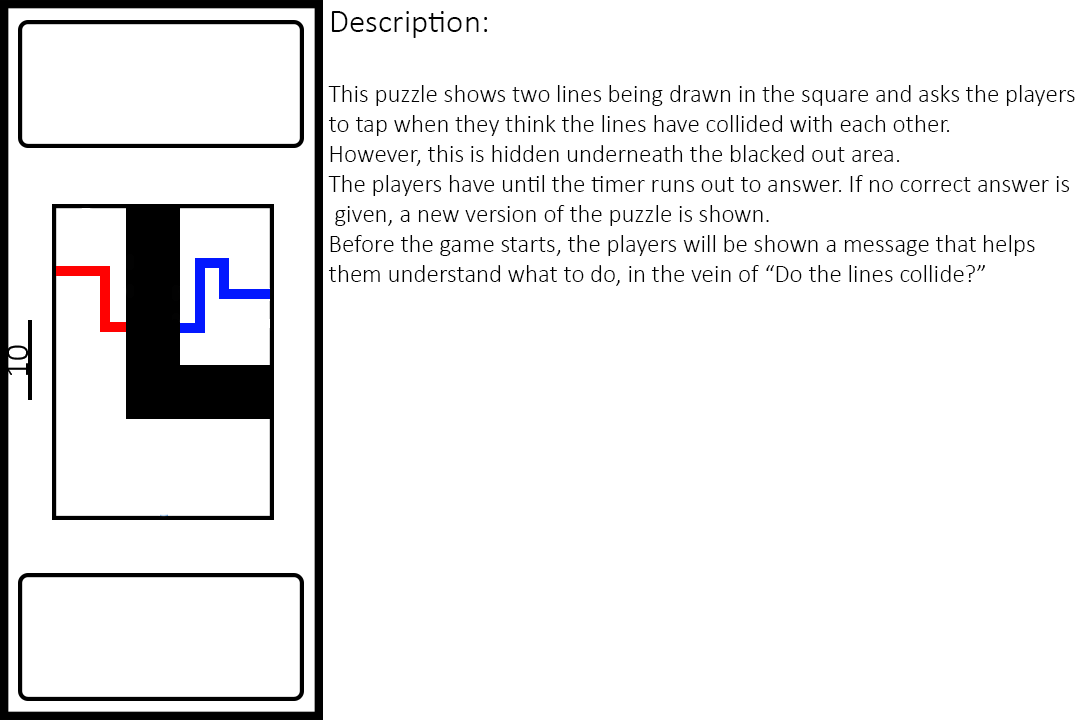
<style>
.page{position:relative;width:1080px;height:720px;background:#ffffff}
.page>*{position:absolute;margin:0}
.t1{font:25px "Calibri-Light";color:#020202}
.t2{font:33.3px "Calibri-Light";color:#020202}
</style>
<div class="page">
<p class="t1" style="left:328px;top:11px;width:747px;height:275px"><span class="t2">Description:<br><br></span>This puzzle shows two lines being drawn in the square and asks the players<br>to tap when they think the lines have collided with each other. <br>However, this is hidden underneath the blacked out area.<br>The players have until the timer runs out to answer. If no correct answer is<br> given, a new version of the puzzle is shown.<br>Before the game starts, the players will be shown a message that helps<br>them understand what to do, in the vein of “Do the lines collide?”</p>
</div>
